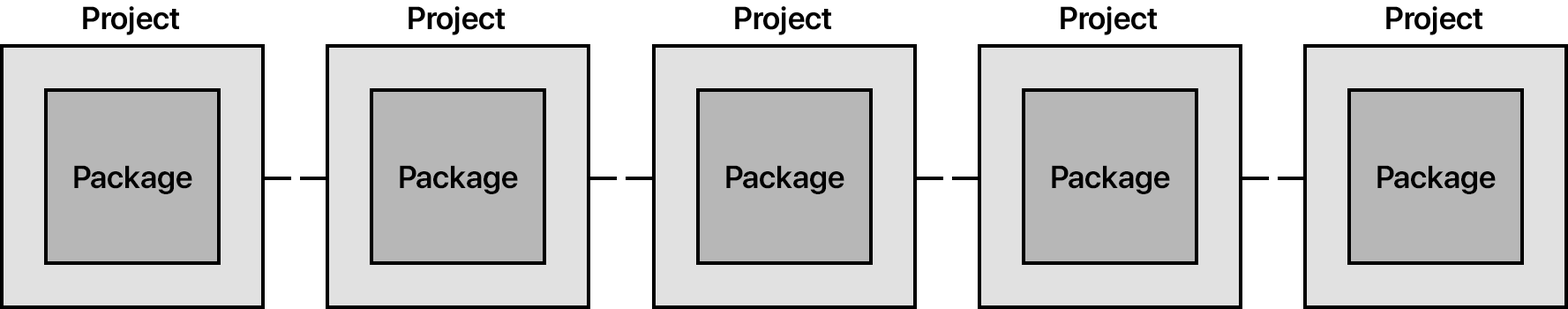
<style>
.page{position:relative;width:1568px;height:309px;background:#e1e1e1}
.page>*{position:absolute;margin:0}
.t1{font:31.8px "SFProDisplay-Semibold";color:#000000}
</style>
<div class="page">
<p class="t1" style="left:83px;top:6px;width:96px;height:29px">Project</p>
<p class="t1" style="left:409px;top:6px;width:96px;height:29px">Project</p>
<p class="t1" style="left:735px;top:6px;width:96px;height:29px">Project</p>
<p class="t1" style="left:1061px;top:6px;width:96px;height:29px">Project</p>
<p class="t1" style="left:1386px;top:6px;width:96px;height:29px">Project</p>
<p class="t1" style="left:74px;top:165px;width:118px;height:29px">Package</p>
<p class="t1" style="left:400px;top:165px;width:118px;height:29px">Package</p>
<p class="t1" style="left:726px;top:165px;width:118px;height:29px">Package</p>
<p class="t1" style="left:1052px;top:165px;width:118px;height:29px">Package</p>
<p class="t1" style="left:1377px;top:165px;width:119px;height:29px">Package</p>
</div>
